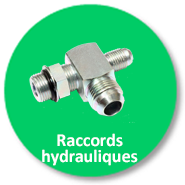
<style>
.page{position:relative;width:185px;height:185px;background:#00cc66}
.page>*{position:absolute;margin:0}
.t1{font:18px/16px "Calibri-Bold";color:#ffffff}
</style>
<div class="page">
<p class="t1" style="left:42px;top:133px;width:96px;height:33px;text-align:center">Raccords  <br>hydrauliques</p>
</div>
